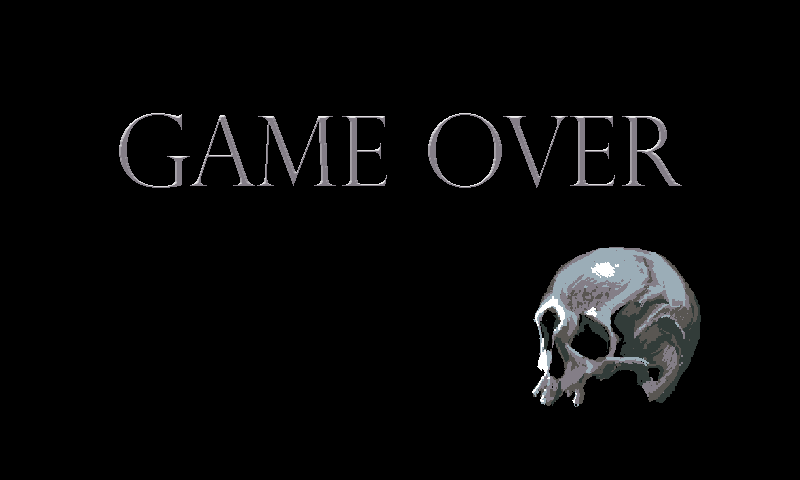
<style>
.page{position:relative;width:800px;height:480px;background:#000000}
.page>*{position:absolute;margin:0}
.t1{font:98.2px "PerpetuaTitlingMT-Light";color:#847e87;text-transform:uppercase}
</style>
<div class="page">
<p class="t1" style="left:119px;top:113px;width:563px;height:75px">GAME OVER</p>
<p class="t1" style="left:119px;top:113px;width:563px;height:75px">GAME OVER</p>
</div>
